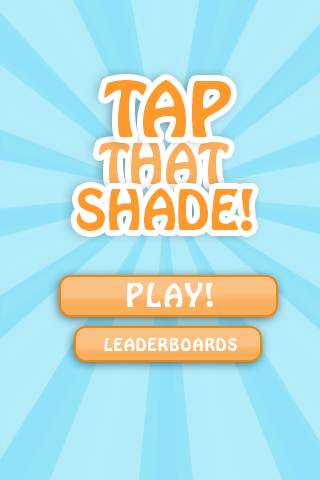
<style>
.page{position:relative;width:320px;height:480px;background:#b1ebf9}
.page>*{position:absolute;margin:0}
.t1{font:67.8px "HoboStd";color:#fe992b}
.t2{font:49.3px "HoboStd";color:#fbaf5d}
.t3{font:49.1px "HoboStd";color:#fe992b}
.t4{font:28.5px "HoboStd";letter-spacing:0.08em;color:#ffffff}
.t5{font:15.3px "HoboStd";letter-spacing:0.08em;color:#ffffff}
</style>
<div class="page">
<p class="t1" style="left:104px;top:80px;width:127px;height:57px">TAP</p>
<p class="t2" style="left:99px;top:142px;width:130px;height:42px">THAT</p>
<p class="t3" style="left:76px;top:188px;width:177px;height:43px">SHADE!</p>
<p class="t4" style="left:127px;top:283px;width:86px;height:24px">PLAY!</p>
<p class="t5" style="left:104px;top:338px;width:133px;height:13px">LEADERBOARDS</p>
</div>
